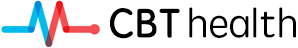
<style>
.page{position:relative;width:298px;height:48px;background:#ffffff}
.page>*{position:absolute;margin:0}
.t1{font:40px "STYuanti-SC-Regular";color:#000000;font-weight:bold}
.t2{font:40px "STYuanti-SC-Regular";color:#000000}
</style>
<div class="page">
<p class="t1" style="left:110px;top:8px;width:70px;height:31px">CBT</p>
<p class="t2" style="left:189px;top:7px;width:107px;height:31px">health</p>
</div>
